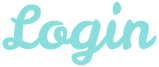
<style>
.page{position:relative;width:159px;height:67px;background:#ffffff}
.page>*{position:absolute;margin:0}
.t1{font:59px "LeckerliOne-Regular";color:#88dddd}
</style>
<div class="page">
<p class="t1" style="left:2px;top:1px;width:155px;height:65px">Login</p>
</div>
